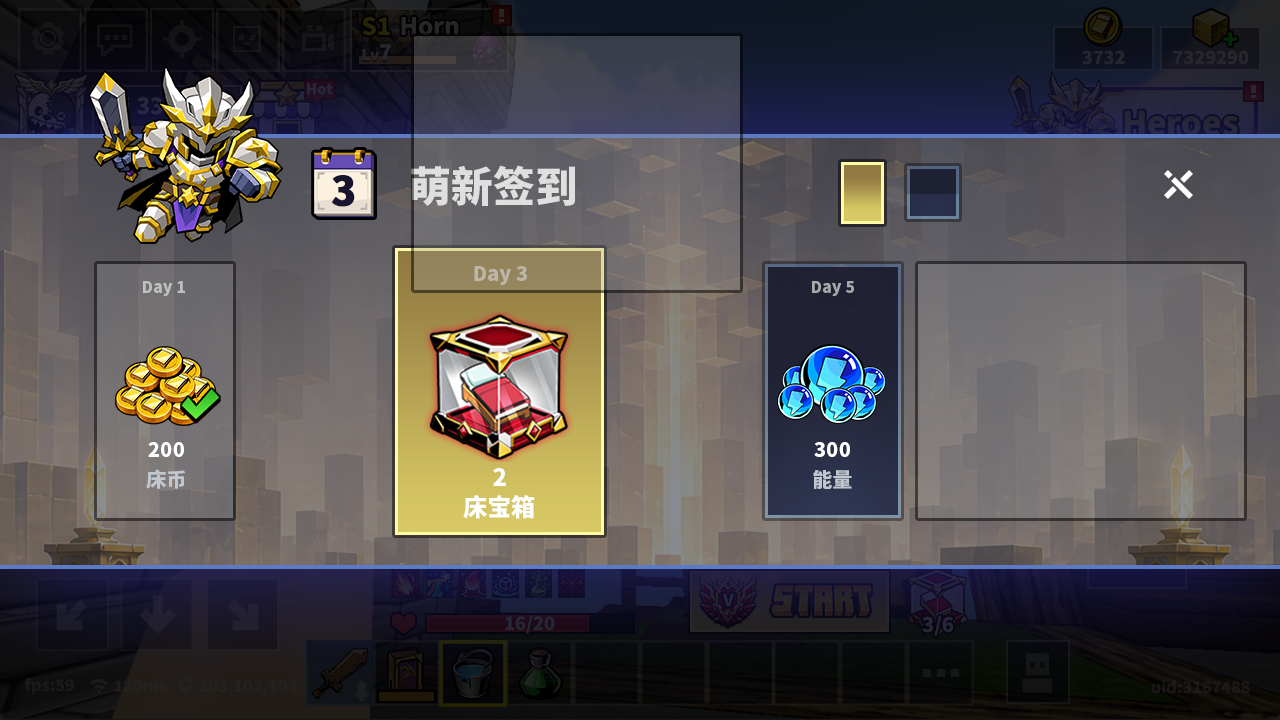
<style>
.page{position:relative;width:1280px;height:720px}
.page>*{position:absolute;margin:0}
.t1{font:42px "NotoSansHans-Black";color:#dfdfdf}
.t2{font:40px "NotoSansHans-Black";color:#16142f;font-weight:bold}
.t3{font:20px "NotoSansHans-Black";color:#bdb7a9}
.t4{font:16px "NotoSansHans-Black";color:#c1c0c1}
.t5{font:16px "NotoSansHans-Black";color:#a9a9ad}
.t6{font:20px "NotoSansHans-Black";color:#ffffff}
.t7{font:20px "NotoSansHans-Black";color:#c1c8cd}
.t8{font:24px "NotoSansHans-Black";color:#ffffff}
</style>
<div class="page">
<p class="t1" style="left:411px;top:165px;width:164px;height:41px">萌新签到</p>
<p class="t2" style="left:332px;top:175px;width:23px;height:32px">3</p>
<p class="t3" style="left:474px;top:266px;width:53px;height:19px">Day 3</p>
<p class="t4" style="left:143px;top:281px;width:42px;height:15px">Day 1</p>
<p class="t5" style="left:812px;top:281px;width:42px;height:15px">Day 5</p>
<p class="t6" style="left:148px;top:442px;width:36px;height:15px">200</p>
<p class="t6" style="left:814px;top:442px;width:36px;height:15px">300</p>
<p class="t7" style="left:146px;top:469px;width:39px;height:20px">床币</p>
<p class="t8" style="left:493px;top:468px;width:13px;height:18px">2</p>
<p class="t7" style="left:813px;top:469px;width:39px;height:20px">能量</p>
<p class="t8" style="left:463px;top:495px;width:72px;height:24px">床宝箱</p>
</div>
